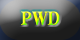
<style>
.page{position:relative;width:80px;height:40px}
.page>*{position:absolute;margin:0}
.t1{font:18px "MyungjoXB-HM"}
</style>
<div class="page">
<p class="t1" style="left:21px;top:11px;width:39px;height:14px">PWD</p>
</div>
